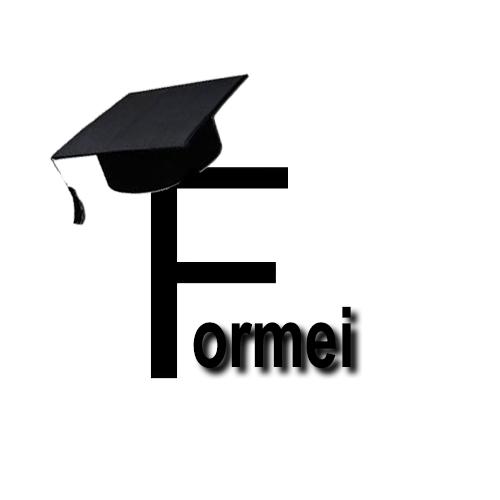
<style>
.page{position:relative;width:500px;height:500px;background:#ffffff}
.page>*{position:absolute;margin:0}
.t1{font:84px "Arial-BoldMT";color:#000000;scale:0.71 1}
</style>
<div class="page">
<p class="t1" style="left:193px;top:306px;width:158px;height:62px">ormei</p>
</div>
